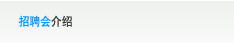
<style>
.page{position:relative;width:234px;height:44px}
.page>*{position:absolute;margin:0}
.t1{font:12px "SimHei";color:#0099ff;scale:0.9 1}
.t2{font:12px "SimHei";color:#3e3e3e;scale:0.9 1}
</style>
<div class="page">
<p class="t1" style="left:18px;top:15px;width:54px;height:12px">招聘会<span class="t2">介绍</span></p>
</div>
